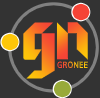
<style>
.page{position:relative;width:100px;height:98px;background:#333333}
.page>*{position:absolute;margin:0}
.t1{font:8.9px "Muli-Bold";scale:0.82 1}
</style>
<div class="page">
<p class="t1" style="left:57px;top:61px;width:31px;height:7px">GRONEE</p>
</div>
